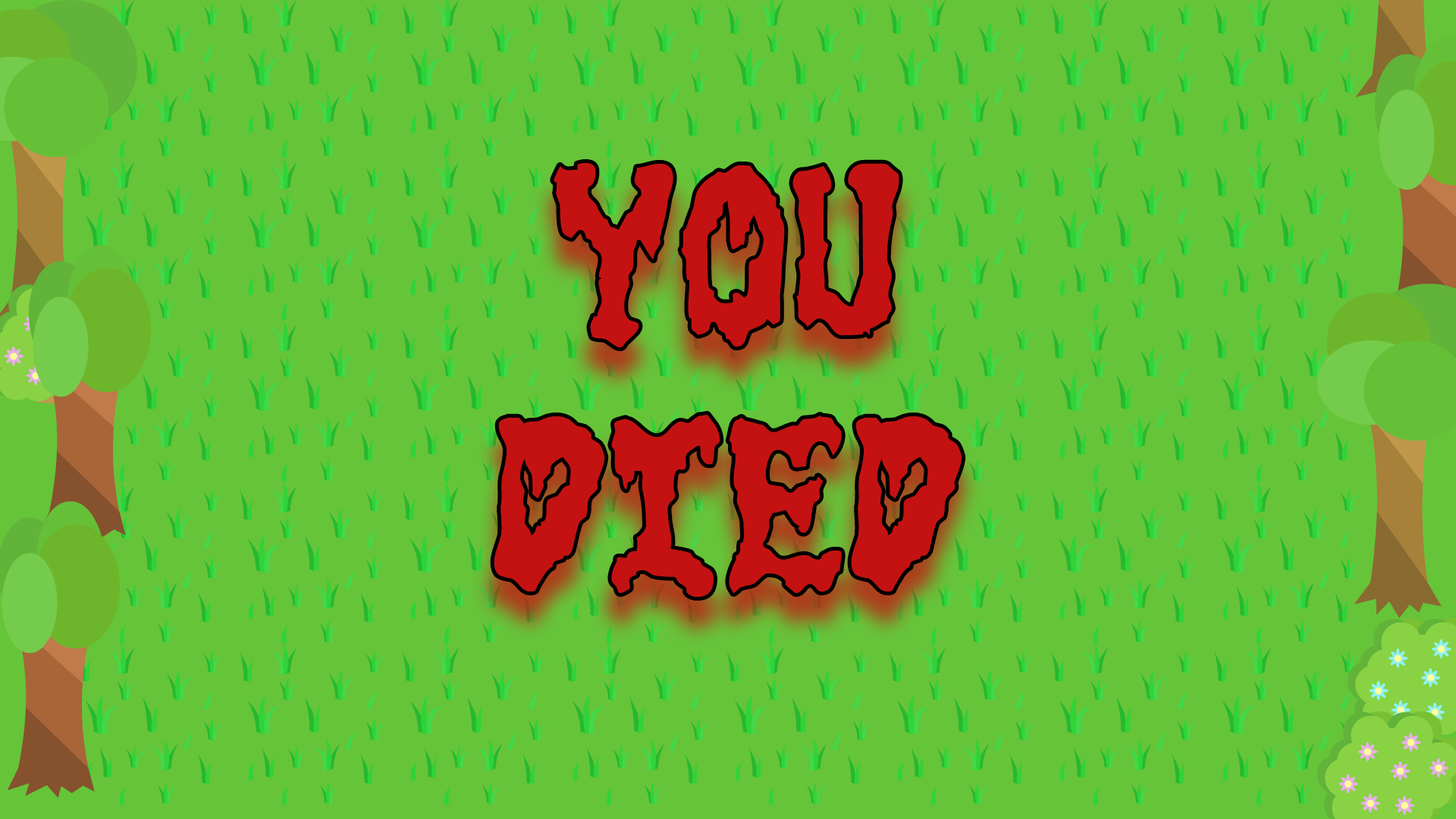
<style>
.page{position:relative;width:1456px;height:819px;background:#66c439}
.page>*{position:absolute;margin:0}
.t1{font:207.8px "GoreFontII";color:#c41212}
</style>
<div class="page">
<p class="t1" style="left:494px;top:162px;width:468px;height:435px;text-align:center">YOU<br>DIED</p>
</div>
